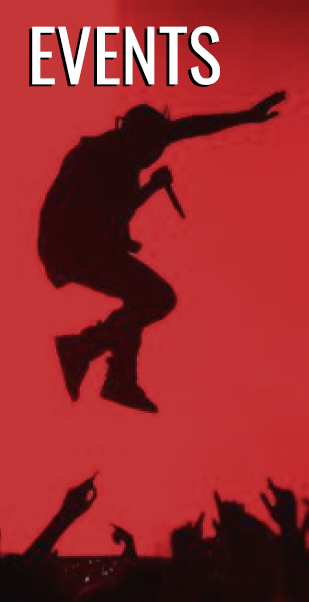
<style>
.page{position:relative;width:309px;height:602px}
.page>*{position:absolute;margin:0}
.t1{font:71px "Oswald-Regular";color:#fefffe;font-weight:bold}
</style>
<div class="page">
<p class="t1" style="left:32px;top:26px;width:188px;height:59px">EVENTS</p>
</div>
